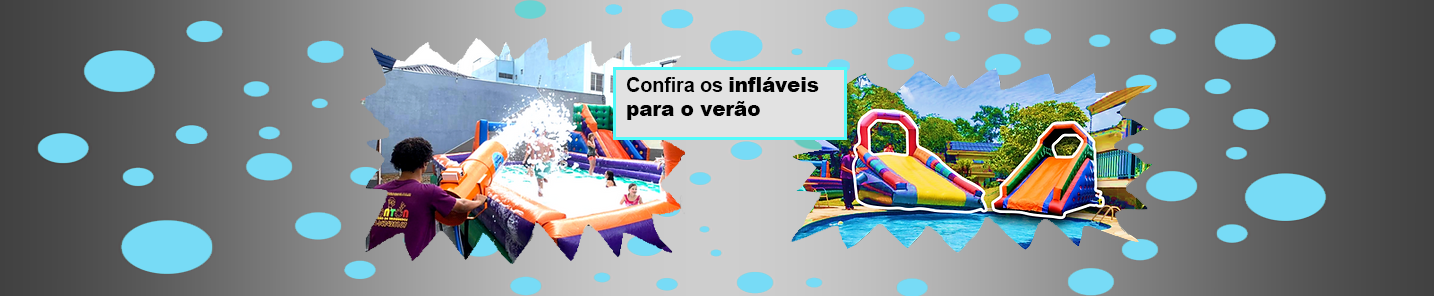
<style>
.page{position:relative;width:1434px;height:296px}
.page>*{position:absolute;margin:0}
.t1{font:20px/24px "Arial-Black";letter-spacing:-0.01em;color:#010101}
.t2{font:20px/24px "Arial-BoldMT";letter-spacing:-0.01em;color:#010101}
</style>
<div class="page">
<p class="t1" style="left:627px;top:77px;width:192px;height:43px"><span class="t2">Confira os </span>infláveis para o verão</p>
</div>
